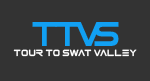
<style>
.page{position:relative;width:150px;height:81px;background:#333333}
.page>*{position:absolute;margin:0}
.t1{font:8.5px "ElementalEnd";color:#ffffff}
</style>
<div class="page">
<p class="t1" style="left:13px;top:49px;width:124px;height:8px">tOUR TO SWAT VALLEY</p>
</div>
